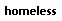
<style>
.page{position:relative;width:62px;height:21px;background:#ffffff}
.page>*{position:absolute;margin:0}
.t1{font:12px "Ebrima-Bold";color:#000000}
</style>
<div class="page">
<p class="t1" style="left:5px;top:6px;width:51px;height:9px">homeless</p>
</div>
